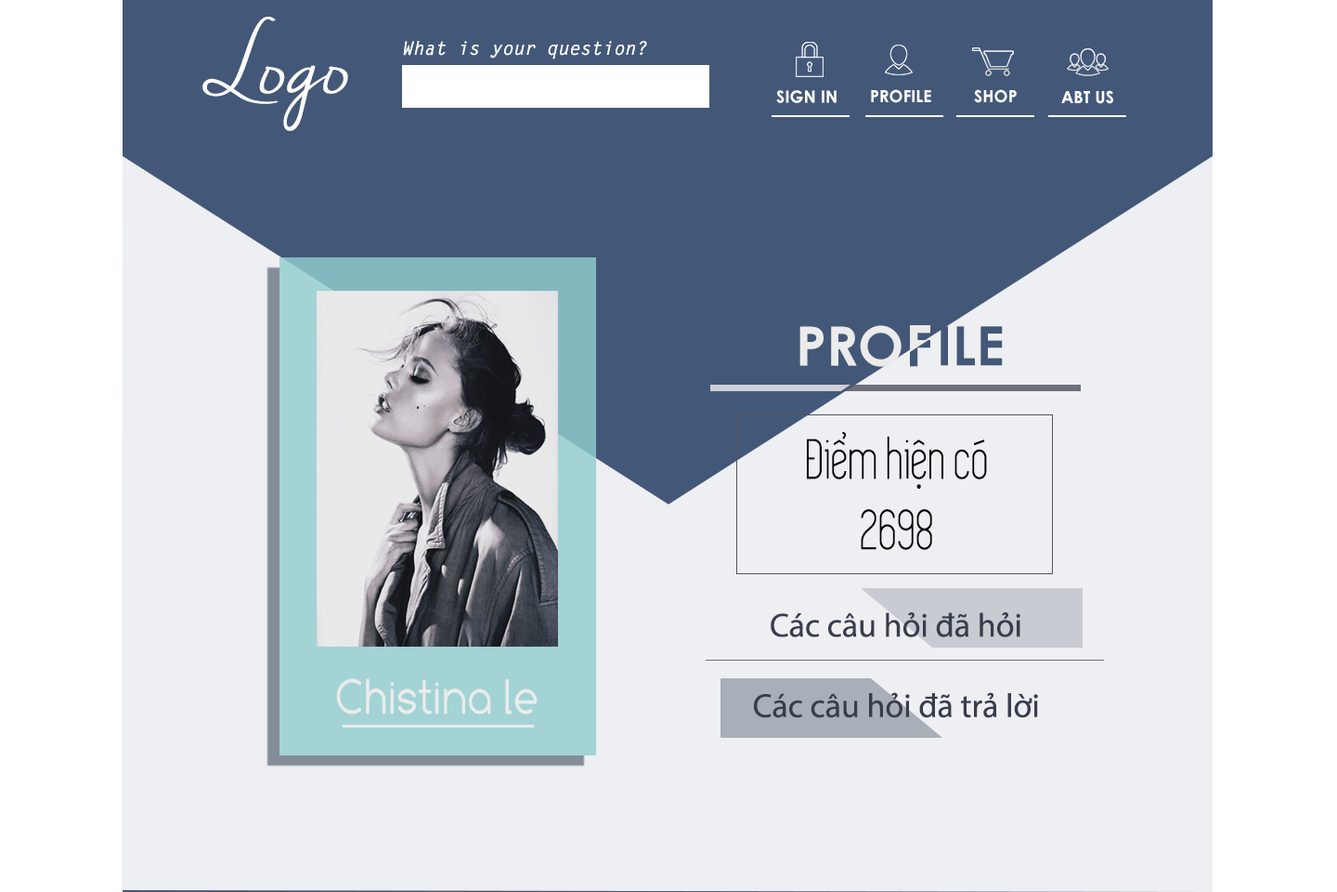
<style>
.page{position:relative;width:1337px;height:892px;background:#eeeff2}
.page>*{position:absolute;margin:0}
.t1{font:88.7px "NellaSueDemo";color:#ffffff}
.t2{font:18.6px "LetterGothicStd-BoldSlanted";color:#ffffff}
.t3{font:16.7px "CenturyGothic-Bold";color:#ffffff}
.t4{font:54.4px "CenturyGothic-Bold";color:#ebebeb}
.t5{font:54.4px "CenturyGothic-Bold";color:#435878}
.t6{font:58.7px "iCielSimplifica";color:#000000;scale:0.88 1}
.t7{font:33.4px "MyriadPro-Regular";color:#373d4c}
.t8{font:50.4px "Comfortaa";color:#ebebeb;scale:0.87 1}
</style>
<div class="page">
<p class="t1" style="left:202px;top:17px;width:146px;height:114px">Logo</p>
<p class="t2" style="left:403px;top:41px;width:244px;height:18px">What is your question?</p>
<p class="t3" style="left:871px;top:89px;width:61px;height:14px">PROFILE</p>
<p class="t3" style="left:974px;top:89px;width:43px;height:14px">SHOP</p>
<p class="t3" style="left:776px;top:90px;width:61px;height:13px">SIGN IN</p>
<p class="t3" style="left:1062px;top:90px;width:52px;height:14px">ABT US</p>
<p class="t4" style="left:800px;top:325px;width:102px;height:42px">PRO</p>
<p class="t5" style="left:941px;top:326px;width:62px;height:40px">ILE</p>
<p class="t6" style="left:807px;top:432px;width:180px;height:118px;text-align:center">Điểm hiện có<br>2698</p>
<p class="t7" style="left:771px;top:612px;width:250px;height:25px">Các câu hỏi đã hỏi</p>
<p class="t8" style="left:336px;top:678px;width:202px;height:36px">Chistina le</p>
<p class="t7" style="left:754px;top:692px;width:284px;height:26px">Các câu hỏi đã trả lời</p>
</div>
